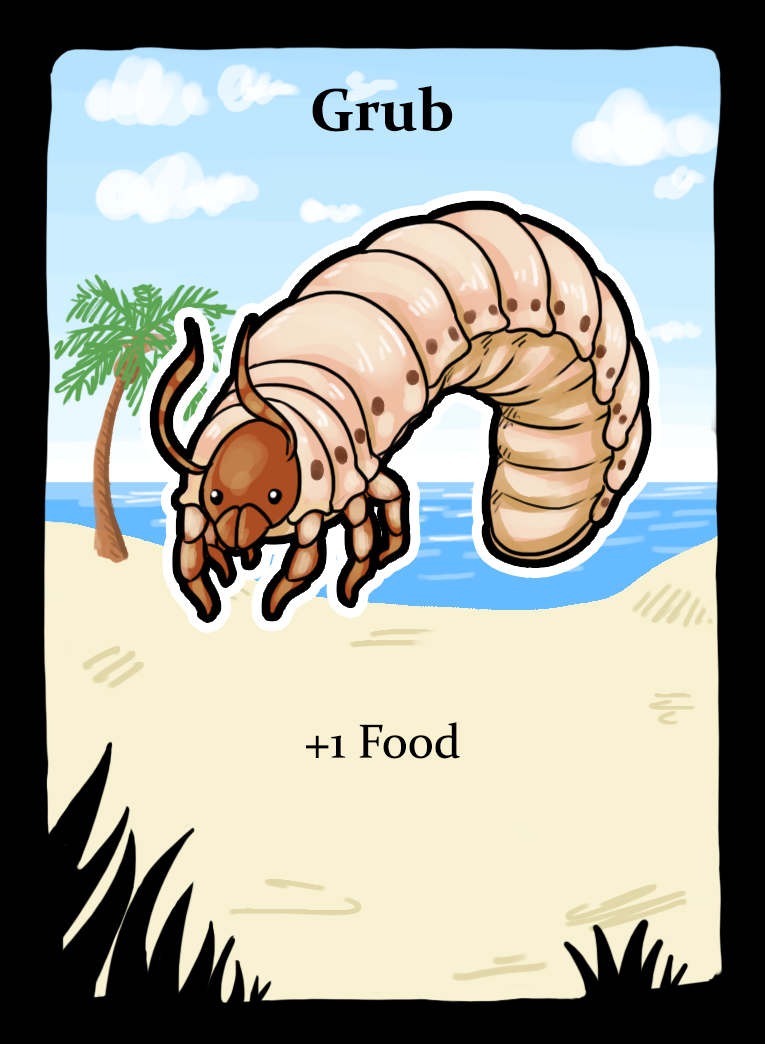
<style>
.page{position:relative;width:765px;height:1044px;background:#f8f2d3}
.page>*{position:absolute;margin:0}
.t1{font:60px "Constantia-Bold";color:#000000}
.t2{font:48px "Constantia";color:#000000}
</style>
<div class="page">
<p class="t1" style="left:312px;top:86px;width:141px;height:46px">Grub</p>
<p class="t2" style="left:306px;top:722px;width:154px;height:37px">+1 Food</p>
</div>
